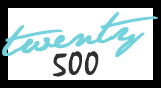
<style>
.page{position:relative;width:161px;height:88px;background:#ffffff}
.page>*{position:absolute;margin:0}
.t1{font:39px "JaneAusten";color:#74d2dd;font-weight:bold}
.t2{font:34px "Mistral";color:#2f2f2f;font-weight:bold}
</style>
<div class="page">
<p class="t1" style="left:2px;top:12px;width:156px;height:45px;rotate:-7deg">twenty</p>
<p class="t2" style="left:53px;top:51px;width:46px;height:26px">500</p>
</div>
